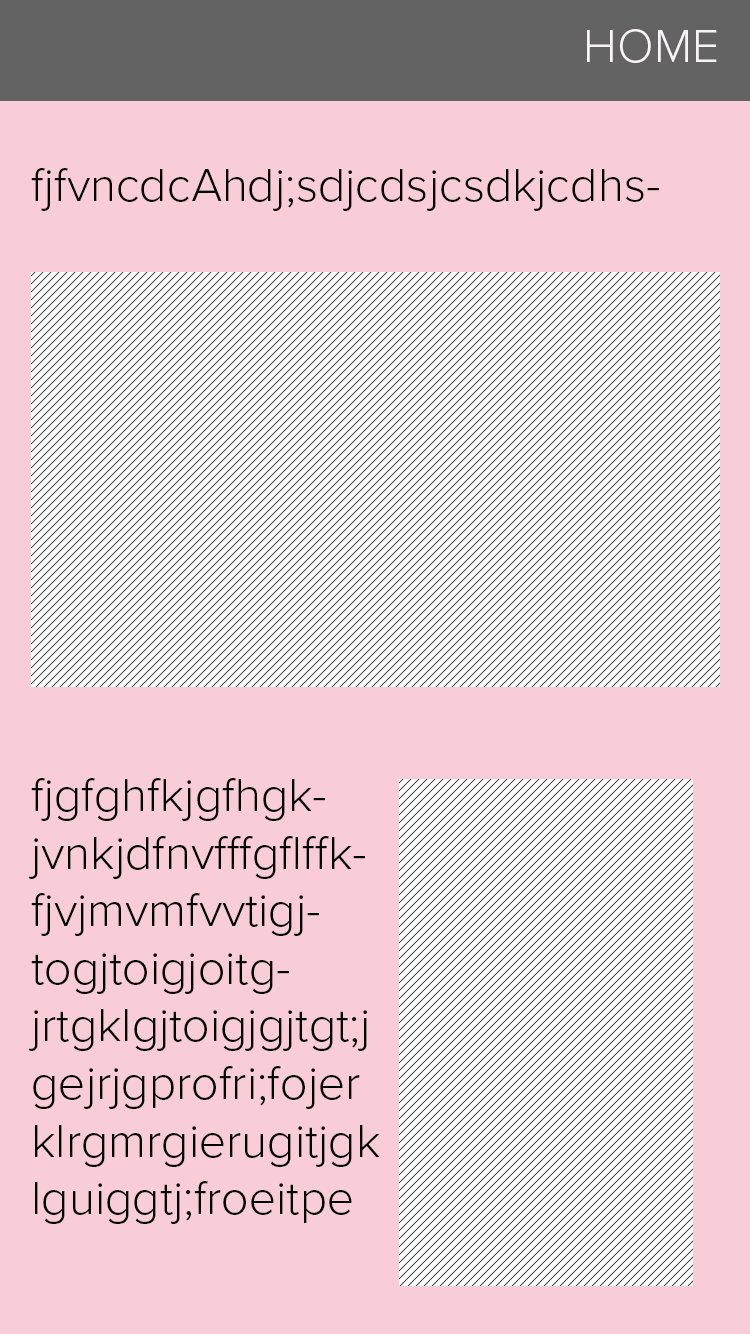
<style>
.page{position:relative;width:750px;height:1334px;background:#f8cdd7}
.page>*{position:absolute;margin:0}
.t1{font:48px "ProximaNova-Light";color:#f8f4f7}
.t2{font:48px "ProximaNova-Light";color:#050204}
.t3{font:48px "ProximaNova-Light";color:#000000}
</style>
<div class="page">
<p class="t1" style="left:587px;top:29px;width:130px;height:34px">HOME</p>
<p class="t2" style="left:31px;top:168px;width:628px;height:43px">fjfvncdcAhdj;sdjcdsjcsdkjcdhskcnsdCsdnckjDSNCDJKSNCDSCJKN</p>
<p class="t3" style="left:28px;top:778px;width:352px;height:446px">fjgfghfkjgfhgkjvnkjdfnvfffgflffkfjvjmvmfvvtigjtogjtoigjoitgjrtgklgjtoigjgjtgt;jgejrjgprofri;fojerklrgmrgierugitjgklguiggtj;froeitpeofk</p>
</div>
